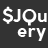
<style>
.page{position:relative;width:48px;height:48px;background:#333333}
.page>*{position:absolute;margin:0}
.t1{font:18px "CocoGothic-Bold";color:#ffffff}
</style>
<div class="page">
<p class="t1" style="left:2px;top:6px;width:45px;height:20px">$JQu</p>
<p class="t1" style="left:17px;top:28px;width:29px;height:13px">ery</p>
</div>
